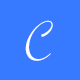
<style>
.page{position:relative;width:80px;height:80px;background:#3779ff}
.page>*{position:absolute;margin:0}
.t1{font:60px "SavoyeLetPlain";color:#ffffff}
</style>
<div class="page">
<p class="t1" style="left:25px;top:20px;width:28px;height:41px">C</p>
</div>
